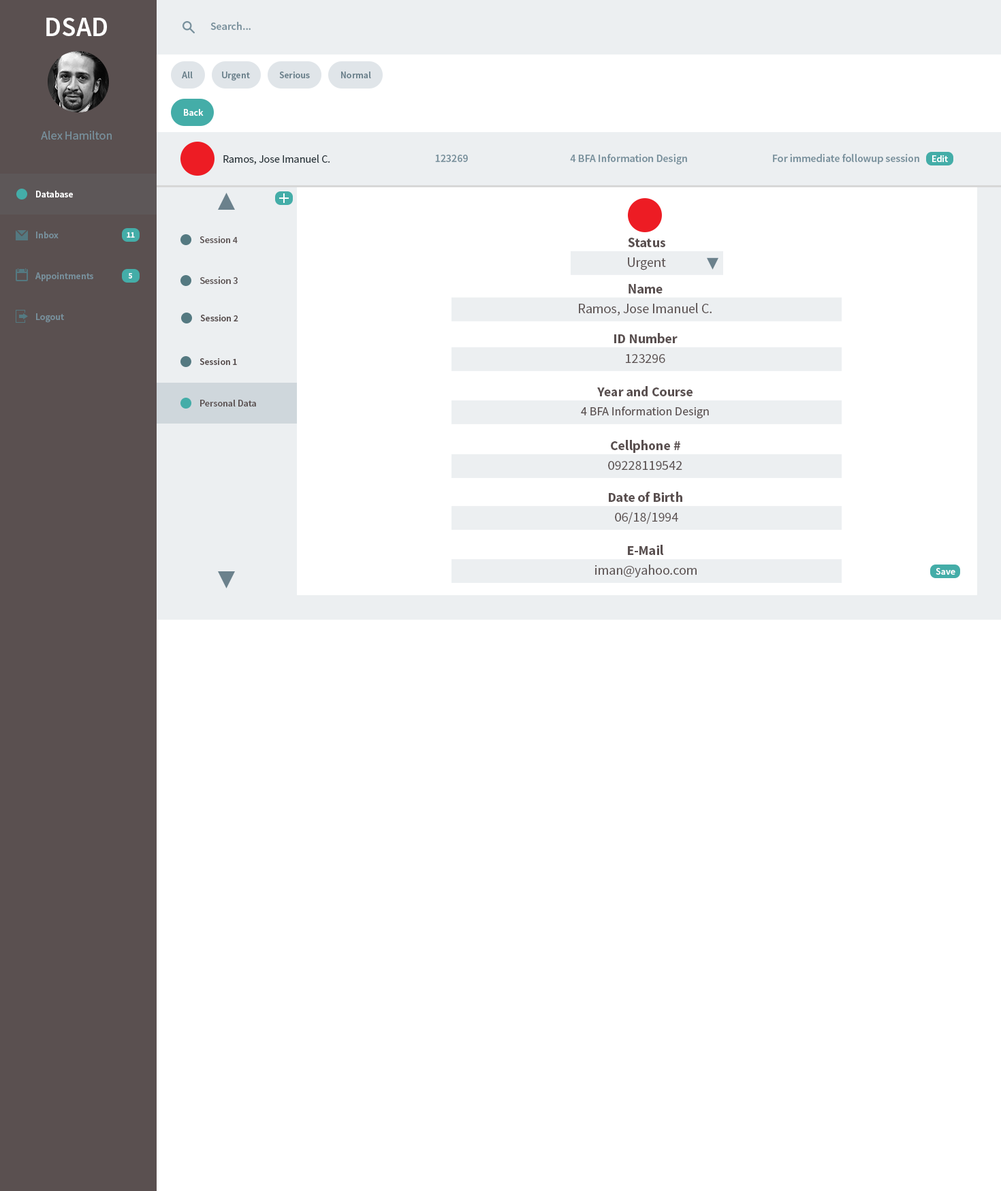
<style>
.page{position:relative;width:1001px;height:1191px;background:#ffffff}
.page>*{position:absolute;margin:0}
.t1{font:27.2px "SourceSansPro-Semibold";color:#ffffff}
.t2{font:10.9px "SourceSansPro-Semibold";color:#78909c}
.t3{font:9.5px "SourceSansPro-Semibold";color:#6b818c}
.t4{font:9.5px "SourceSansPro-Semibold";color:#ffffff}
.t5{font:12.3px "SourceSansPro-Regular";color:#78909c}
.t6{font:10.9px "SourceSansPro-Regular";color:#263238}
.t7{font:11px "SourceSansPro-Semibold";color:#78909c}
.t8{font:9.5px "SourceSansPro-Semibold";color:#78909c}
.t9{font:8.2px "SourceSansPro-Bold";color:#f8fafb}
.t10{font:9.5px "SourceSansPro-Semibold";color:#5a5050}
.t11{font:13.6px "SourceSansPro-Bold";color:#5a5050}
.t12{font:13.6px "SourceSansPro-Regular";color:#5a5050}
.t13{font:9.8px "SourceSansPro-Semibold";color:#5a5050}
.t14{font:12.2px "SourceSansPro-Regular";color:#5a5050}
</style>
<div class="page">
<p class="t1" style="left:46px;top:18px;width:61px;height:18px">DSAD</p>
<p class="t2" style="left:210px;top:22px;width:41px;height:8px">Search...</p>
<p class="t3" style="left:182px;top:72px;width:11px;height:6px">All</p>
<p class="t3" style="left:222px;top:72px;width:28px;height:9px">Urgent</p>
<p class="t3" style="left:279px;top:72px;width:31px;height:6px">Serious</p>
<p class="t3" style="left:341px;top:72px;width:30px;height:6px">Normal</p>
<p class="t4" style="left:184px;top:109px;width:20px;height:7px">Back</p>
<p class="t5" style="left:41px;top:131px;width:71px;height:9px">Alex Hamilton</p>
<p class="t6" style="left:223px;top:155px;width:107px;height:10px">Ramos, Jose Imanuel C.</p>
<p class="t2" style="left:435px;top:155px;width:33px;height:7px">123269</p>
<p class="t2" style="left:570px;top:154px;width:117px;height:11px">4 BFA Information Design</p>
<p class="t7" style="left:773px;top:154px;width:146px;height:10px">For immediate followup session</p>
<p class="t4" style="left:932px;top:155px;width:16px;height:7px">Edit</p>
<p class="t4" style="left:36px;top:191px;width:37px;height:6px">Database</p>
<p class="t8" style="left:36px;top:232px;width:23px;height:6px">Inbox</p>
<p class="t9" style="left:127px;top:232px;width:8px;height:6px">11</p>
<p class="t10" style="left:200px;top:236px;width:38px;height:7px">Session 4</p>
<p class="t11" style="left:628px;top:238px;width:37px;height:9px">Status</p>
<p class="t12" style="left:628px;top:257px;width:38px;height:13px">Urgent</p>
<p class="t8" style="left:35px;top:272px;width:58px;height:9px">Appointments</p>
<p class="t9" style="left:128px;top:273px;width:4px;height:6px">5</p>
<p class="t13" style="left:200px;top:276px;width:38px;height:8px">Session 3</p>
<p class="t11" style="left:629px;top:284px;width:34px;height:10px">Name</p>
<p class="t12" style="left:579px;top:303px;width:133px;height:13px">Ramos, Jose Imanuel C.</p>
<p class="t8" style="left:36px;top:313px;width:28px;height:10px">Logout</p>
<p class="t10" style="left:200px;top:315px;width:38px;height:6px">Session 2</p>
<p class="t11" style="left:614px;top:333px;width:64px;height:10px">ID Number</p>
<p class="t10" style="left:200px;top:358px;width:37px;height:7px">Session 1</p>
<p class="t12" style="left:626px;top:354px;width:39px;height:9px">123296</p>
<p class="t11" style="left:597px;top:386px;width:96px;height:10px">Year and Course</p>
<p class="t10" style="left:200px;top:400px;width:56px;height:7px">Personal Data</p>
<p class="t14" style="left:581px;top:407px;width:128px;height:12px">4 BFA Information Design</p>
<p class="t11" style="left:611px;top:440px;width:69px;height:13px">Cellphone #</p>
<p class="t12" style="left:608px;top:461px;width:74px;height:9px">09228119542</p>
<p class="t11" style="left:609px;top:492px;width:73px;height:10px">Date of Birth</p>
<p class="t12" style="left:615px;top:512px;width:63px;height:12px">06/18/1994</p>
<p class="t11" style="left:628px;top:545px;width:36px;height:10px">E-Mail</p>
<p class="t12" style="left:595px;top:565px;width:102px;height:13px">iman@yahoo.com</p>
<p class="t4" style="left:936px;top:568px;width:19px;height:7px">Save</p>
</div>
